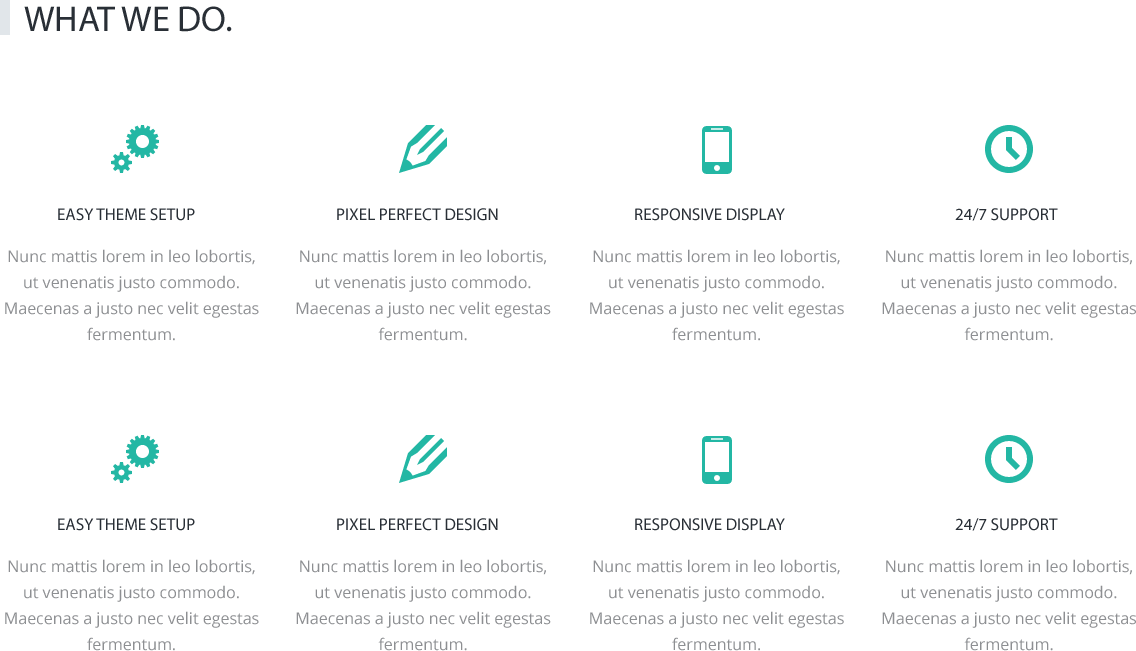
<style>
.page{position:relative;width:1136px;height:651px;background:#ffffff}
.page>*{position:absolute;margin:0}
.t1{font:36px "QuattrocentoSans-Bold";color:#292f36;text-transform:uppercase}
.t2{font:17px "QuattrocentoSans-Bold";color:#292f36;text-transform:uppercase}
.t3{font:16px/26px "OpenSans";color:#8d8f92}
</style>
<div class="page">
<p class="t1" style="left:24px;top:6px;width:208px;height:26px">what we do.</p>
<p class="t2" style="left:58px;top:208px;width:137px;height:13px">Easy theme Setup</p>
<p class="t2" style="left:337px;top:208px;width:161px;height:13px">pixel perfect design</p>
<p class="t2" style="left:635px;top:208px;width:150px;height:13px">responsive display</p>
<p class="t2" style="left:955px;top:208px;width:103px;height:13px">24/7 support</p>
<p class="t3" style="left:5px;top:249px;width:254px;height:92px;text-align:center">Nunc mattis lorem in leo lobortis, ut venenatis justo commodo. Maecenas a justo nec velit egestas fermentum.</p>
<p class="t3" style="left:296px;top:249px;width:255px;height:92px;text-align:center">Nunc mattis lorem in leo lobortis, ut venenatis justo commodo. Maecenas a justo nec velit egestas fermentum.</p>
<p class="t3" style="left:590px;top:249px;width:254px;height:92px;text-align:center">Nunc mattis lorem in leo lobortis, ut venenatis justo commodo. Maecenas a justo nec velit egestas fermentum.</p>
<p class="t3" style="left:882px;top:249px;width:254px;height:92px;text-align:center">Nunc mattis lorem in leo lobortis, ut venenatis justo commodo. Maecenas a justo nec velit egestas fermentum.</p>
<p class="t2" style="left:58px;top:518px;width:137px;height:13px">Easy theme Setup</p>
<p class="t2" style="left:337px;top:518px;width:161px;height:13px">pixel perfect design</p>
<p class="t2" style="left:635px;top:518px;width:150px;height:13px">responsive display</p>
<p class="t2" style="left:955px;top:518px;width:103px;height:13px">24/7 support</p>
<p class="t3" style="left:5px;top:559px;width:254px;height:92px;text-align:center">Nunc mattis lorem in leo lobortis, ut venenatis justo commodo. Maecenas a justo nec velit egestas fermentum.</p>
<p class="t3" style="left:296px;top:559px;width:255px;height:92px;text-align:center">Nunc mattis lorem in leo lobortis, ut venenatis justo commodo. Maecenas a justo nec velit egestas fermentum.</p>
<p class="t3" style="left:590px;top:559px;width:254px;height:92px;text-align:center">Nunc mattis lorem in leo lobortis, ut venenatis justo commodo. Maecenas a justo nec velit egestas fermentum.</p>
<p class="t3" style="left:882px;top:559px;width:254px;height:92px;text-align:center">Nunc mattis lorem in leo lobortis, ut venenatis justo commodo. Maecenas a justo nec velit egestas fermentum.</p>
</div>
